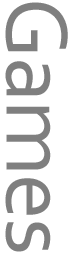
<style>
.page{position:relative;width:72px;height:253px;background:#ffffff}
.page>*{position:absolute;margin:0}
.t1{font:92px "Corbel";letter-spacing:-0.02em;color:#7f7f7f}
</style>
<div class="page">
<p class="t1" style="left:5px;top:2px;width:63px;height:250px;rotate:90deg">Games</p>
</div>
